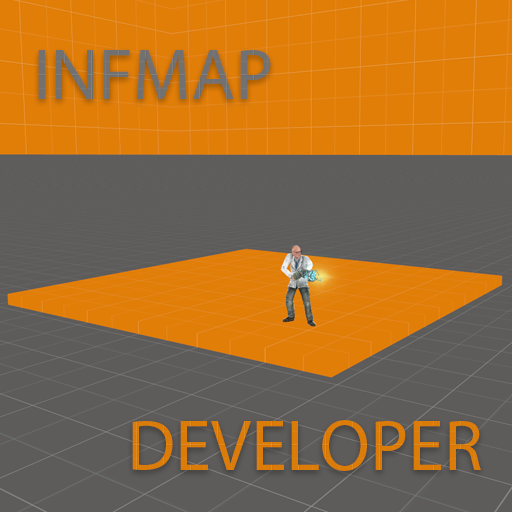
<style>
.page{position:relative;width:512px;height:512px;background:#e17e08}
.page>*{position:absolute;margin:0}
.t1{font:72px "MyriadPro-Regular";color:#615f5f}
.t2{font:72px "MyriadPro-Regular";color:#e78413}
</style>
<div class="page">
<p class="t1" style="left:38px;top:50px;width:233px;height:49px">INFMAP</p>
<p class="t2" style="left:132px;top:420px;width:349px;height:51px">DEVELOPER</p>
</div>
